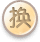
<style>
.page{position:relative;width:40px;height:42px;background:#ffffff}
.page>*{position:absolute;margin:0}
.t1{font:24px "YuppyTC-Regular";color:#c3a67e;text-transform:uppercase}
</style>
<div class="page">
<p class="t1" style="left:9px;top:6px;width:22px;height:23px">换</p>
</div>
